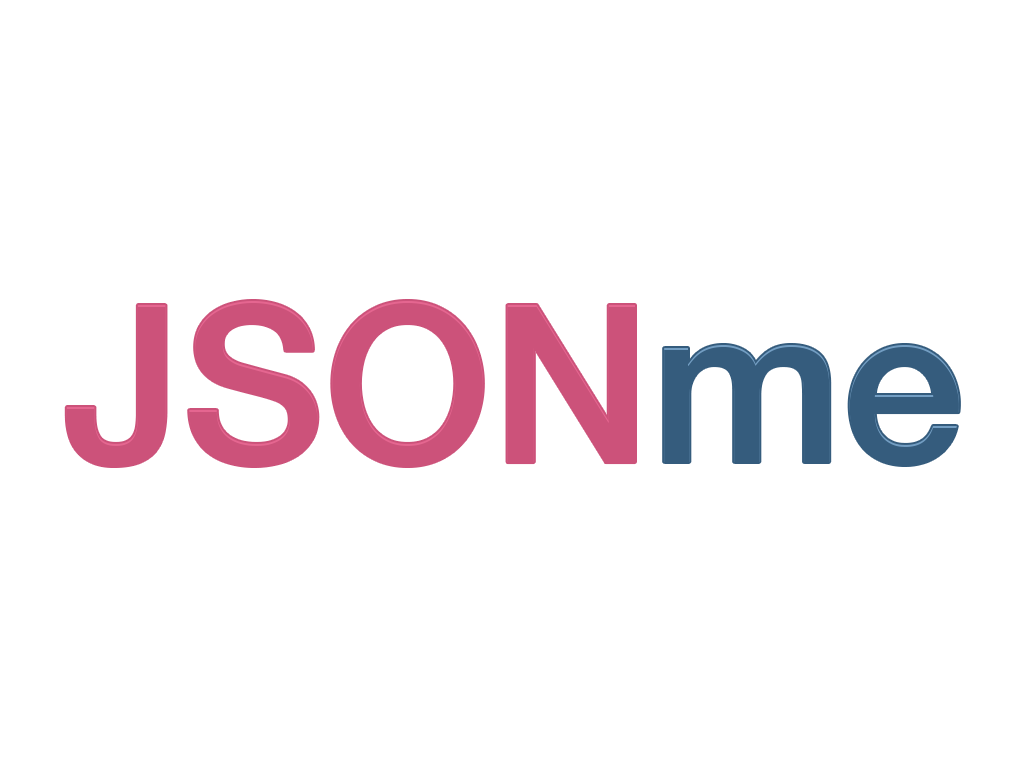
<style>
.page{position:relative;width:1024px;height:768px;background:#ffffff}
.page>*{position:absolute;margin:0}
.t1{font:220px "HelveticaNeue-Medium";color:#cc527a}
.t2{font:220px "HelveticaNeue-Medium";color:#355c7d}
</style>
<div class="page">
<p class="t1" style="left:66px;top:301px;width:569px;height:165px">JSON</p>
<p class="t2" style="left:664px;top:345px;width:295px;height:120px">me</p>
</div>
